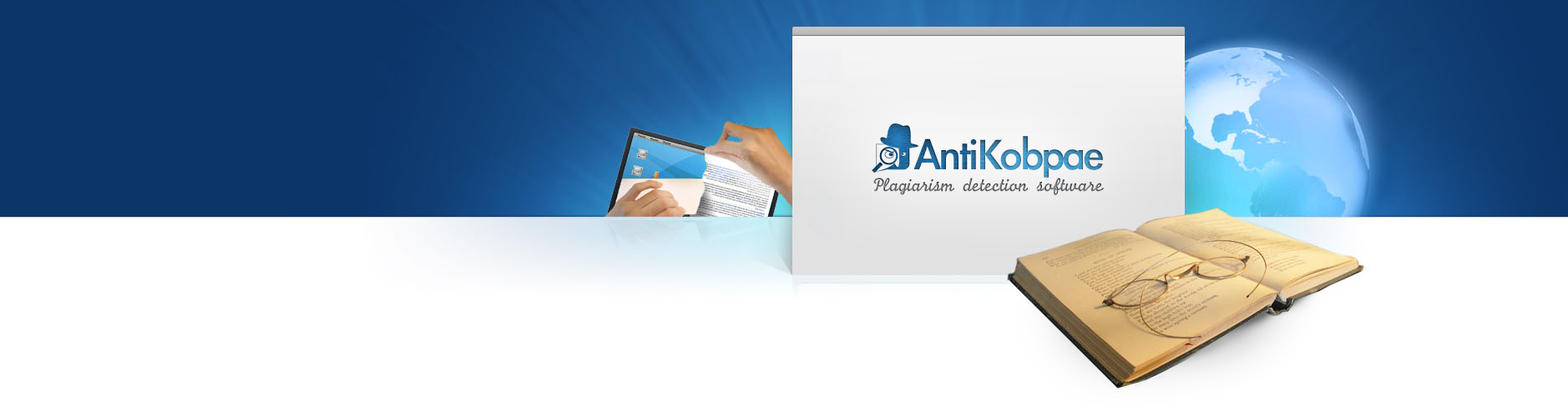
<style>
.page{position:relative;width:1568px;height:417px;background:#ffffff}
.page>*{position:absolute;margin:0}
.t1{font:33.4px "JCfg";letter-spacing:-0.025em}
</style>
<div class="page">
<p class="t1" style="left:873px;top:178px;width:231px;height:17px">Plagiarism detection software</p>
</div>
